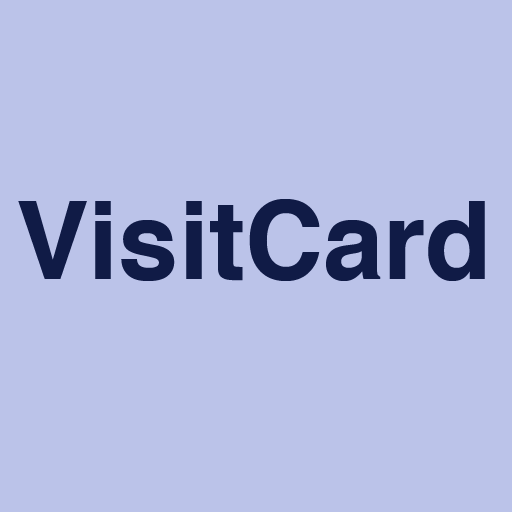
<style>
.page{position:relative;width:512px;height:512px;background:#bbc3e9}
.page>*{position:absolute;margin:0}
.t1{font:108.3px "Helvetica-Bold";color:#101b46}
</style>
<div class="page">
<p class="t1" style="left:18px;top:199px;width:467px;height:82px">VisitCard</p>
</div>
